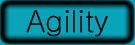
<style>
.page{position:relative;width:135px;height:45px;background:#08a4ba}
.page>*{position:absolute;margin:0}
.t1{font:30px "Gulim";color:#000000}
</style>
<div class="page">
<p class="t1" style="left:26px;top:10px;width:82px;height:27px">Agility</p>
</div>
